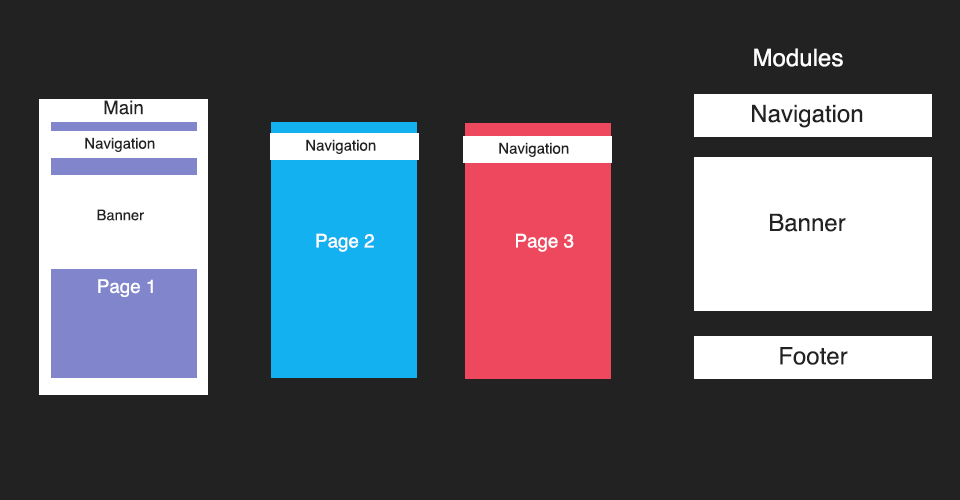
<style>
.page{position:relative;width:960px;height:500px;background:#222222}
.page>*{position:absolute;margin:0}
.t1{font:24px "Helvetica";color:#ffffff}
.t2{font:18.7px "Helvetica";color:#222222}
.t3{font:24px "Helvetica";color:#222222}
.t4{font:15.1px "Helvetica";color:#222222}
.t5{font:14.6px "Helvetica";color:#222222}
.t6{font:18.7px "Helvetica";color:#ffffff}
</style>
<div class="page">
<p class="t1" style="left:754px;top:48px;width:89px;height:19px">Modules</p>
<p class="t2" style="left:104px;top:100px;width:39px;height:15px">Main</p>
<p class="t3" style="left:752px;top:104px;width:111px;height:24px">Navigation</p>
<p class="t4" style="left:85px;top:137px;width:70px;height:15px">Navigation</p>
<p class="t4" style="left:306px;top:139px;width:70px;height:15px">Navigation</p>
<p class="t4" style="left:499px;top:142px;width:70px;height:15px">Navigation</p>
<p class="t5" style="left:97px;top:209px;width:47px;height:12px">Banner</p>
<p class="t3" style="left:770px;top:213px;width:76px;height:19px">Banner</p>
<p class="t6" style="left:316px;top:233px;width:58px;height:19px">Page 2</p>
<p class="t6" style="left:516px;top:233px;width:58px;height:19px">Page 3</p>
<p class="t6" style="left:98px;top:279px;width:55px;height:18px">Page 1</p>
<p class="t3" style="left:780px;top:347px;width:68px;height:18px">Footer</p>
</div>
